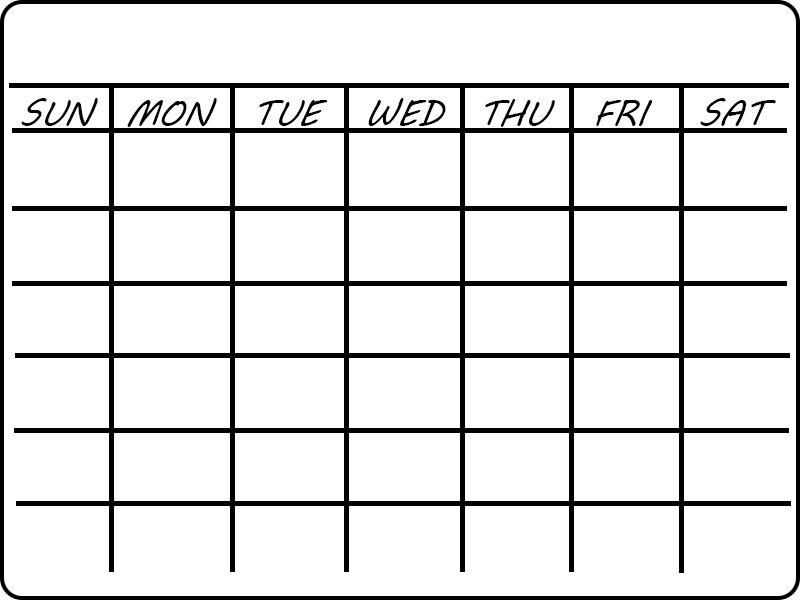
<style>
.page{position:relative;width:800px;height:600px;background:#ffffff}
.page>*{position:absolute;margin:0}
.t1{font:36px "MVBoli";color:#000000;font-style:italic;scale:0.97 1}
</style>
<div class="page">
<p class="t1" style="left:21px;top:98px;width:77px;height:28px">SUN</p>
<p class="t1" style="left:127px;top:98px;width:90px;height:29px">MON</p>
<p class="t1" style="left:259px;top:100px;width:69px;height:26px">TUE</p>
<p class="t1" style="left:368px;top:98px;width:78px;height:28px">WED</p>
<p class="t1" style="left:485px;top:99px;width:70px;height:28px">THU</p>
<p class="t1" style="left:596px;top:100px;width:57px;height:26px">FRI</p>
<p class="t1" style="left:700px;top:98px;width:76px;height:28px">SAT</p>
</div>
